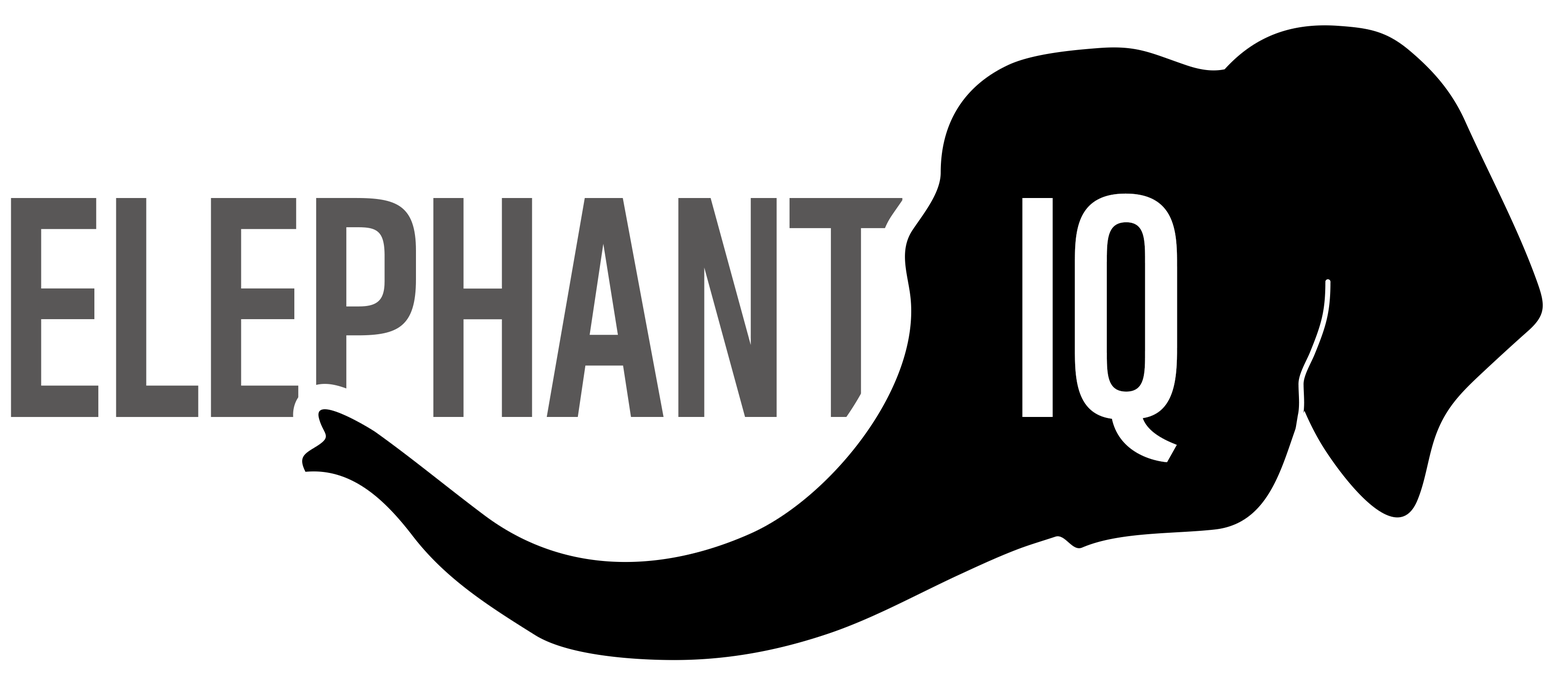
<style>
.page{position:relative;width:1568px;height:686px;background:#ffffff}
.page>*{position:absolute;margin:0}
.t1{font:304.1px "WWF";color:#595757}
.t2{font:304.1px "WWF";color:#ffffff}
</style>
<div class="page">
<p class="t1" style="left:11px;top:198px;width:891px;height:219px">ELEPHANT</p>
<p class="t2" style="left:1022px;top:193px;width:155px;height:269px">IQ</p>
</div>
